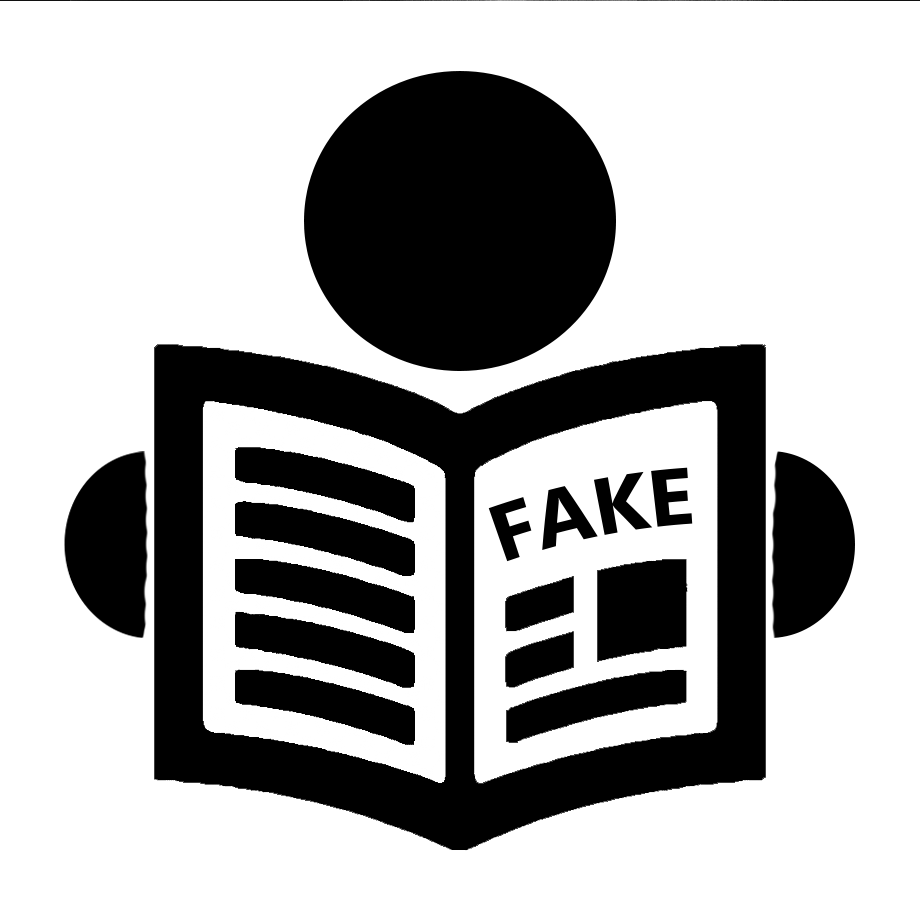
<style>
.page{position:relative;width:920px;height:920px;background:#ffffff}
.page>*{position:absolute;margin:0}
.t1{font:80px "MicrosoftPhagsPa-Bold";color:#000000}
</style>
<div class="page">
<p class="t1" style="left:488px;top:466px;width:205px;height:95px;rotate:-12deg">FAKE</p>
</div>
